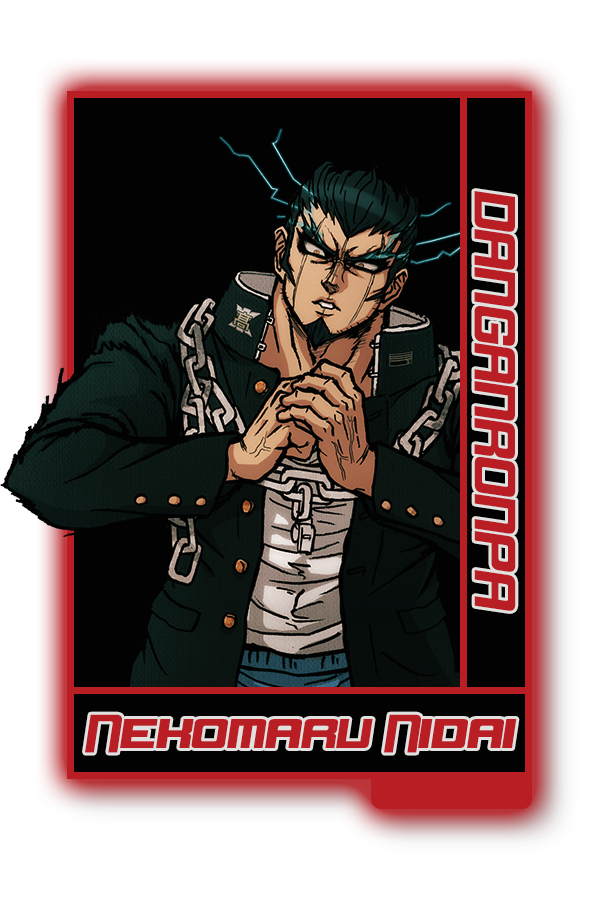
<style>
.page{position:relative;width:600px;height:900px;background:#020202}
.page>*{position:absolute;margin:0}
.t1{font:48.8px "DorBlue";color:#bb2c2e}
.t2{font:45.6px "DorBlue";color:#bb2c2e}
</style>
<div class="page">
<p class="t1" style="left:474px;top:191px;width:42px;height:420px;rotate:90deg">DANGANRONPA</p>
<p class="t2" style="left:85px;top:714px;width:432px;height:39px">Nekomaru Nidai</p>
</div>
